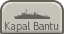
<style>
.page{position:relative;width:64px;height:34px;background:#c5c2b9}
.page>*{position:absolute;margin:0}
.t1{font:10px "UDShinGoPro-Light";color:#6a6560;scale:0.9 1}
</style>
<div class="page">
<p class="t1" style="left:5px;top:21px;width:54px;height:12px">Kapal Bantu</p>
</div>
